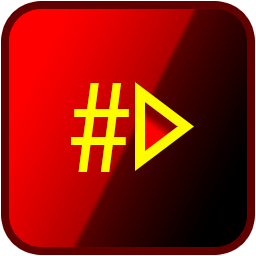
<style>
.page{position:relative;width:256px;height:256px}
.page>*{position:absolute;margin:0}
.t1{font:136.5px "MyriadPro-Regular";color:#fffc00}
</style>
<div class="page">
<p class="t1" style="left:71px;top:83px;width:58px;height:89px">#</p>
</div>
